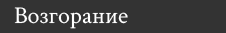
<style>
.page{position:relative;width:226px;height:33px;background:#333333}
.page>*{position:absolute;margin:0}
.t1{font:24px "CrimsonText-Regular";color:#ffffff}
</style>
<div class="page">
<p class="t1" style="left:14px;top:7px;width:114px;height:22px">Возгорание</p>
</div>
